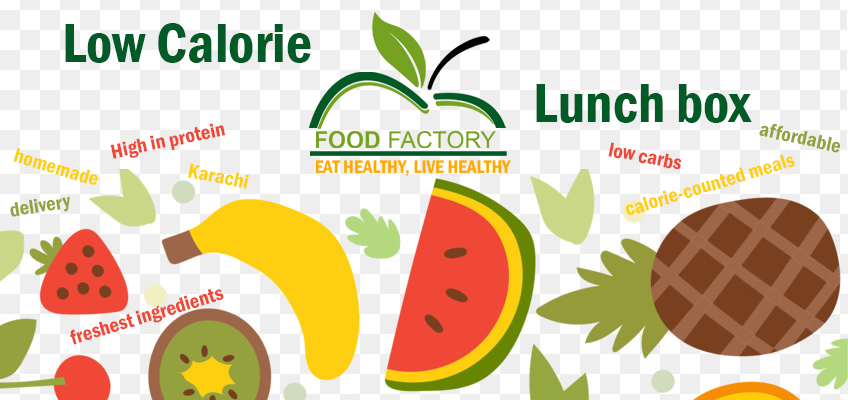
<style>
.page{position:relative;width:848px;height:400px;background:#ffffff}
.page>*{position:absolute;margin:0}
.t1{font:57.2px "FranklinGothic-DemiCond";color:#025a27}
.t2{font:20.8px "FranklinGothic-DemiCond";color:#ef4836}
.t3{font:20.8px "FranklinGothic-DemiCond";color:#95a13f}
.t4{font:20.8px "FranklinGothic-DemiCond";color:#fecf10}
</style>
<div class="page">
<p class="t1" style="left:65px;top:23px;width:246px;height:40px">Low Calorie</p>
<p class="t1" style="left:536px;top:84px;width:216px;height:39px">Lunch box</p>
<p class="t2" style="left:110px;top:123px;width:116px;height:36px;rotate:-12deg">High in protein</p>
<p class="t3" style="left:759px;top:123px;width:81px;height:30px;rotate:12deg">affordable</p>
<p class="t4" style="left:13px;top:148px;width:85px;height:37px;rotate:16deg">homemade</p>
<p class="t2" style="left:608px;top:142px;width:74px;height:28px;rotate:11deg">low carbs</p>
<p class="t4" style="left:626px;top:154px;width:169px;height:61px;rotate:-17deg">calorie-counted meals</p>
<p class="t4" style="left:188px;top:163px;width:61px;height:26px;rotate:12deg">Karachi</p>
<p class="t3" style="left:10px;top:196px;width:60px;height:21px;rotate:-9deg">delivery</p>
<p class="t2" style="left:70px;top:288px;width:154px;height:57px;rotate:-17deg">freshest ingredients</p>
</div>
